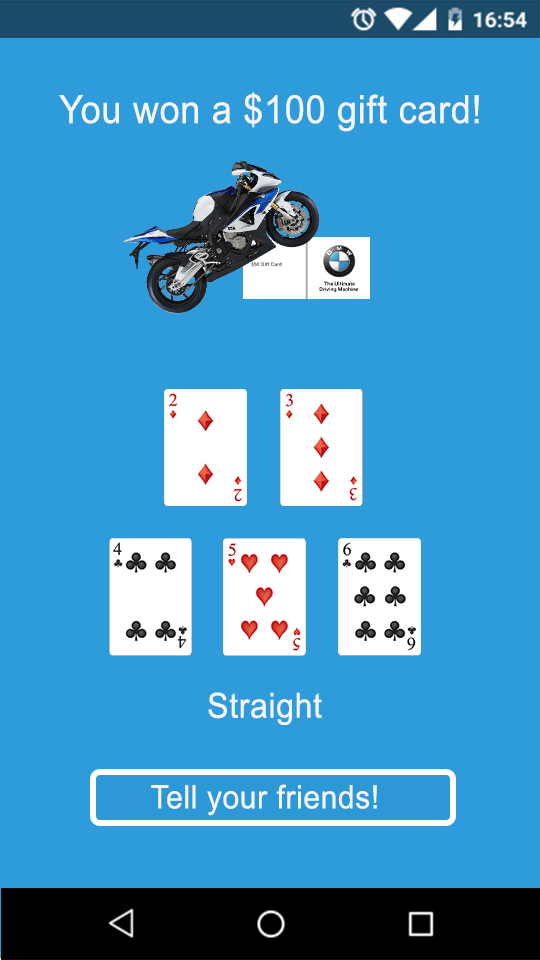
<style>
.page{position:relative;width:540px;height:960px;background:#2e9bda}
.page>*{position:absolute;margin:0}
.t1{font:38.9px "ArialMT";letter-spacing:0.02em;color:#f5f6fc;scale:0.93 1}
.t2{font:34.6px "ArialMT";letter-spacing:0.02em;color:#f5f6fc;scale:0.93 1}
.t3{font:32.4px "ArialMT";letter-spacing:0.02em;color:#f5f6fc;scale:0.93 1}
</style>
<div class="page">
<p class="t1" style="left:59px;top:92px;width:420px;height:40px">You won a $100 gift card!</p>
<p class="t2" style="left:208px;top:692px;width:114px;height:33px">Straight</p>
<p class="t3" style="left:151px;top:784px;width:226px;height:32px">Tell your friends!</p>
</div>
